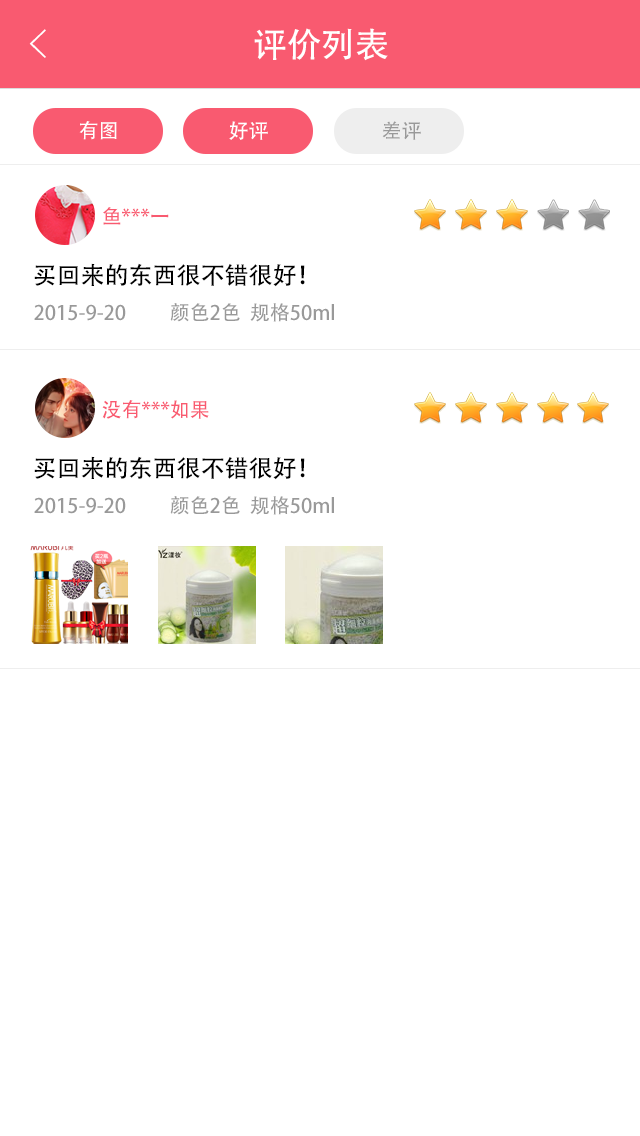
<style>
.page{position:relative;width:640px;height:1136px;background:#ffffff}
.page>*{position:absolute;margin:0}
.t1{font:40px "FZYXJW--GB1-0";color:#ffffff}
.t2{font:34px "AdobeHeitiStd-Regular";color:#ffffff}
.t3{font:20px "AdobeHeitiStd-Regular";color:#ffffff}
.t4{font:20px "AdobeHeitiStd-Regular";color:#999999}
.t5{font:20px "AdobeHeitiStd-Regular";color:#f95a70}
.t6{font:24px "AdobeHeitiStd-Regular";color:#000000}
</style>
<div class="page">
<p class="t1" style="left:29px;top:29px;width:17px;height:29px">&lt;</p>
<p class="t2" style="left:254px;top:28px;width:134px;height:33px">评价列表</p>
<p class="t3" style="left:79px;top:121px;width:38px;height:19px">有图</p>
<p class="t3" style="left:229px;top:121px;width:39px;height:19px">好评</p>
<p class="t4" style="left:382px;top:121px;width:39px;height:19px">差评</p>
<p class="t5" style="left:103px;top:207px;width:66px;height:18px">鱼***一</p>
<p class="t6" style="left:34px;top:263px;width:271px;height:24px">买回来的东西很不错很好！</p>
<p class="t4" style="left:34px;top:304px;width:92px;height:17px">2015-9-20</p>
<p class="t4" style="left:170px;top:303px;width:164px;height:19px">颜色2色  规格50ml</p>
<p class="t5" style="left:102px;top:400px;width:107px;height:19px">没有***如果</p>
<p class="t6" style="left:34px;top:456px;width:271px;height:24px">买回来的东西很不错很好！</p>
<p class="t4" style="left:34px;top:497px;width:92px;height:17px">2015-9-20</p>
<p class="t4" style="left:170px;top:496px;width:164px;height:19px">颜色2色  规格50ml</p>
</div>
